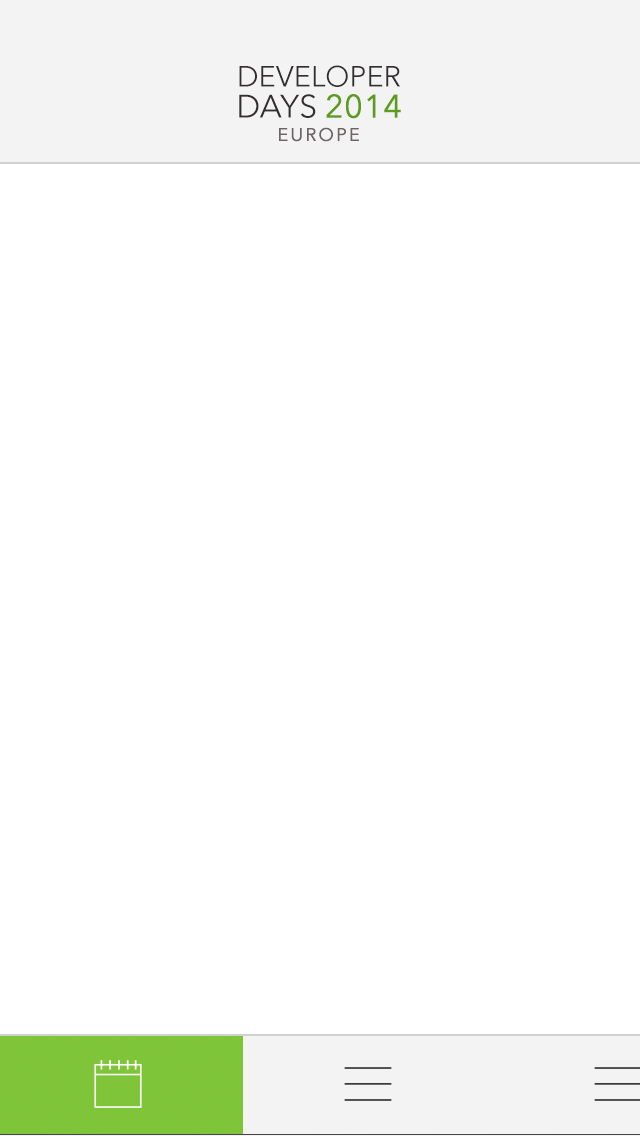
<style>
.page{position:relative;width:640px;height:1136px;background:#ffffff}
.page>*{position:absolute;margin:0}
.t1{font:29px "AvenirNext-Regular";color:#322e2d}
.t2{font:32px "AvenirNext-Regular";color:#322e2d}
.t3{font:32px "AvenirNext-Regular";color:#5c9c1c;font-weight:bold}
.t4{font:18px "AvenirNext-Regular";letter-spacing:0.1em;color:#6d6565;font-weight:bold}
</style>
<div class="page">
<p class="t1" style="left:239px;top:65px;width:161px;height:22px">DEVELOPER</p>
<p class="t2" style="left:239px;top:94px;width:77px;height:24px">DAYS</p>
<p class="t3" style="left:326px;top:94px;width:75px;height:25px">2014</p>
<p class="t4" style="left:279px;top:127px;width:80px;height:15px">EUROPE</p>
</div>
